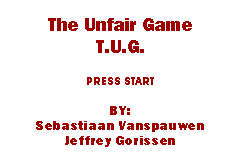
<style>
.page{position:relative;width:240px;height:160px;background:#ffffff}
.page>*{position:absolute;margin:0}
.t1{font:12.5px "FranklinGothic-Heavy";letter-spacing:0.05em;color:#9e0000}
.t2{font:18.8px "FranklinGothic-Heavy";color:#9e0000}
.t3{font:11.5px "FranklinGothic-Heavy";color:#9e0000}
.t4{font:12.5px "FranklinGothic-Heavy";color:#9e0000}
.t5{font:12.5px "FranklinGothic-Heavy";letter-spacing:0.075em;color:#9e0000}
</style>
<div class="page">
<p class="t1" style="left:36px;top:18px;width:168px;height:129px;text-align:center"><span class="t2">The Unfair Game<br>T.U.G.<br><br></span><span class="t3">PRESS START<br></span><span class="t4"><br></span>BY:<br>Sebas<span class="t5">ti</span>aan Vanspauwen<br>Jeffrey Gorissen</p>
</div>
